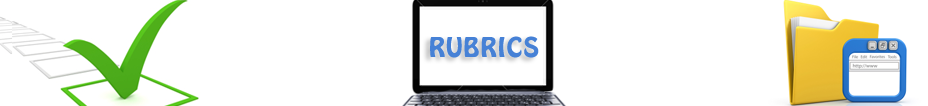
<style>
.page{position:relative;width:928px;height:106px;background:#ffffff}
.page>*{position:absolute;margin:0}
.t1{font:24px "HoboStd";letter-spacing:0.05em;color:#4681d6}
</style>
<div class="page">
<p class="t1" style="left:430px;top:36px;width:109px;height:22px">RUBRICS</p>
</div>
